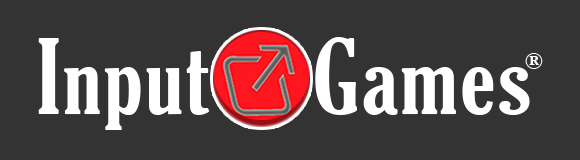
<style>
.page{position:relative;width:580px;height:160px;background:#333333}
.page>*{position:absolute;margin:0}
.t1{font:99.6px "GloucesterMT-ExtraCondensed";letter-spacing:0.02em;color:#ffffff;scale:1.14 1}
.t2{font:24px "GloucesterMT-ExtraCondensed";letter-spacing:0.02em;color:#ffffff}
</style>
<div class="page">
<p class="t1" style="left:38px;top:37px;width:492px;height:93px">Input     Games</p>
<p class="t2" style="left:525px;top:53px;width:18px;height:16px">®</p>
</div>
